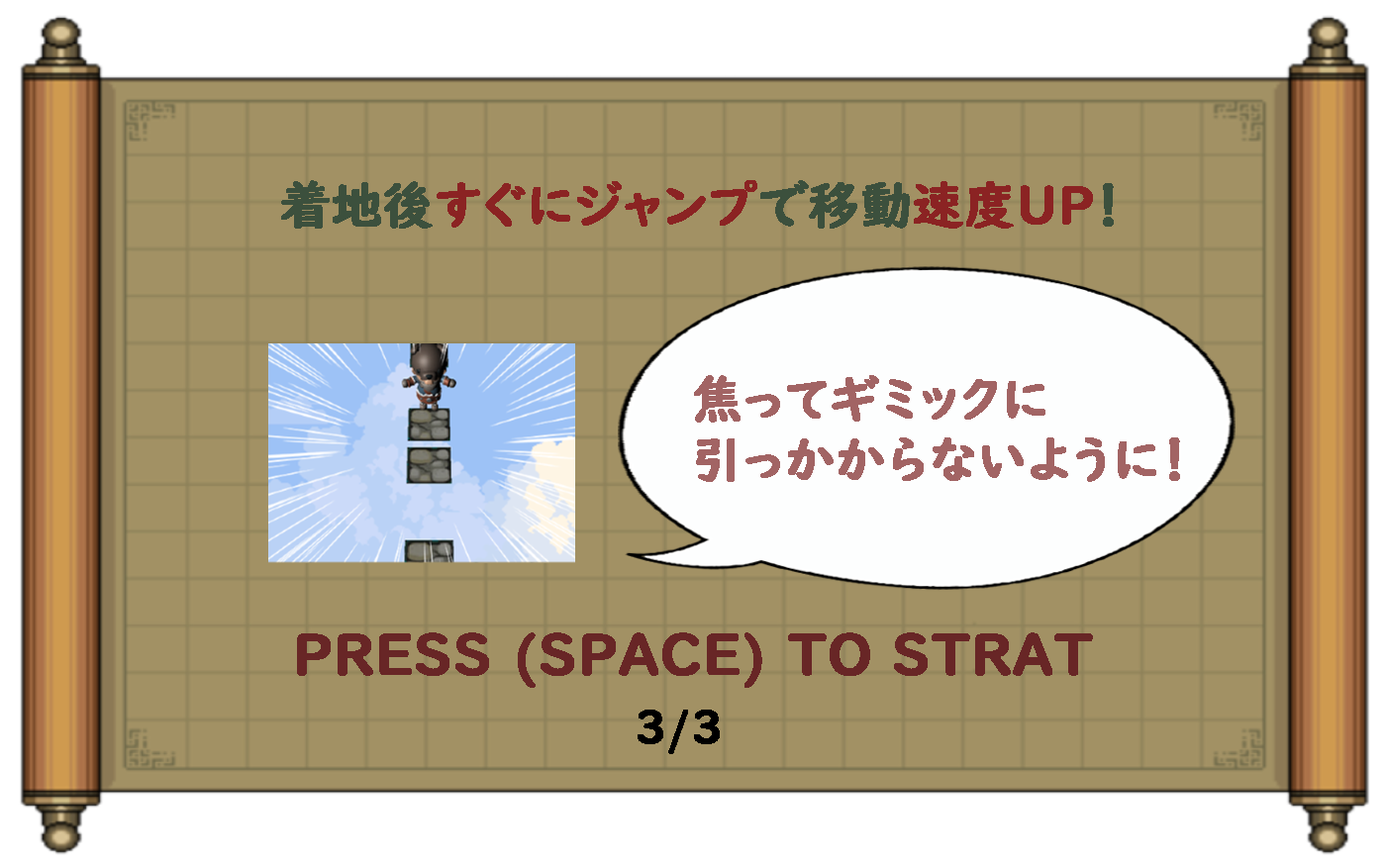
<style>
.page{position:relative;width:1386px;height:860px;background:#a29164}
.page>*{position:absolute;margin:0}
.t1{font:50.5px "UDDigiKyokashoNK-B";color:#8b2323;font-weight:bold}
.t2{font:50.5px "UDDigiKyokashoNK-B";color:#3c503d;font-weight:bold}
.t3{font:50.5px "UDDigiKyokashoNK-B";color:#a26464;font-weight:bold}
.t4{font:55.4px "UDDigiKyokashoNK-B";color:#682626;font-weight:bold}
.t5{font:44.9px "UDDigiKyokashoNK-B";color:#000000;font-weight:bold}
</style>
<div class="page">
<p class="t1" style="left:281px;top:180px;width:833px;height:49px"><span class="t2">着地後</span>すぐにジャンプ<span class="t2">で移動</span>速度UP<span class="t2">！</span></p>
<p class="t3" style="left:694px;top:375px;width:486px;height:107px;text-align:justify">焦ってギミックに<br>引っかからないように！</p>
<p class="t4" style="left:297px;top:633px;width:796px;height:55px">PRESS (SPACE) TO STRAT</p>
<p class="t5" style="left:638px;top:710px;width:82px;height:44px">3/3</p>
</div>
